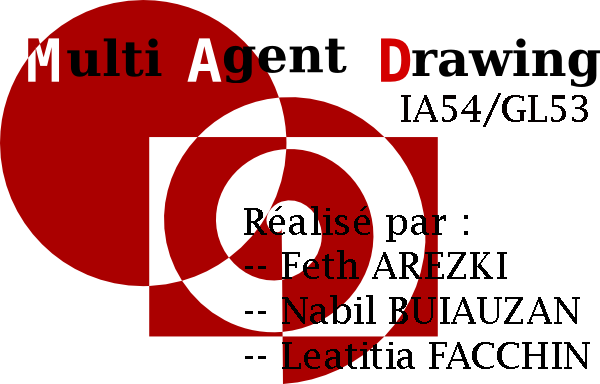
<style>
.page{position:relative;width:600px;height:384px;background:#ffffff}
.page>*{position:absolute;margin:0}
.t1{font:37.2px "LucidaFax";color:#050000}
.t2{font:37.2px "LucidaFax";color:#000000}
</style>
<div class="page">
<p class="t1" style="left:401px;top:93px;width:187px;height:34px">IA54/GL53</p>
<p class="t2" style="left:244px;top:206px;width:346px;height:163px">Réalisé par :<br>-- Feth AREZKI<br>-- Nabil BUIAUZAN<br>-- Leatitia FACCHIN</p>
</div>
